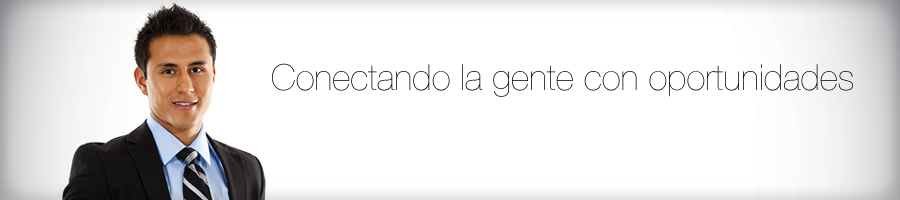
<style>
.page{position:relative;width:900px;height:200px;background:#ffffff}
.page>*{position:absolute;margin:0}
.t1{font:36px "HelveticaNeue-UltraLight";color:#000000}
</style>
<div class="page">
<p class="t1" style="left:272px;top:63px;width:581px;height:34px">Conectando la gente con oportunidades</p>
</div>
